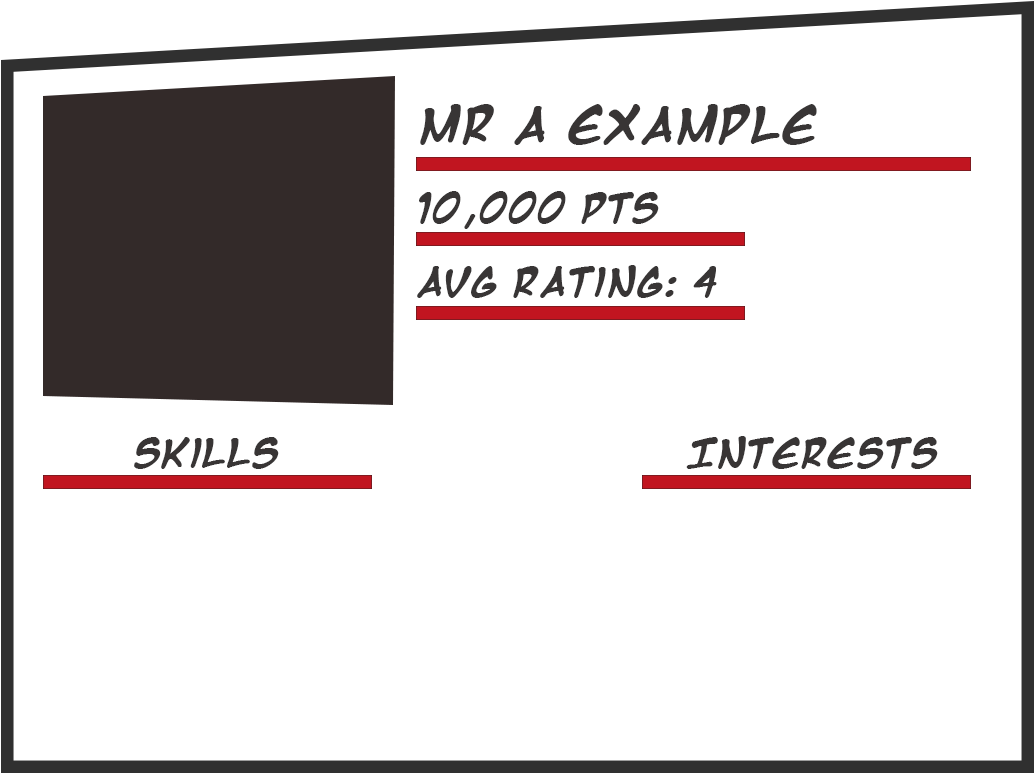
<style>
.page{position:relative;width:1035px;height:775px;background:#ffffff}
.page>*{position:absolute;margin:0}
.t1{font:41.7px "MangaTempleBold";color:#383535}
.t2{font:33.4px "MangaTempleBold";color:#383535}
</style>
<div class="page">
<p class="t1" style="left:420px;top:104px;width:397px;height:41px">Mr A Example</p>
<p class="t2" style="left:419px;top:191px;width:240px;height:38px">10,000 pts</p>
<p class="t2" style="left:417px;top:265px;width:300px;height:33px">AVG Rating: 4</p>
<p class="t2" style="left:134px;top:437px;width:145px;height:32px">Skills</p>
<p class="t2" style="left:686px;top:436px;width:252px;height:33px">Interests</p>
</div>
